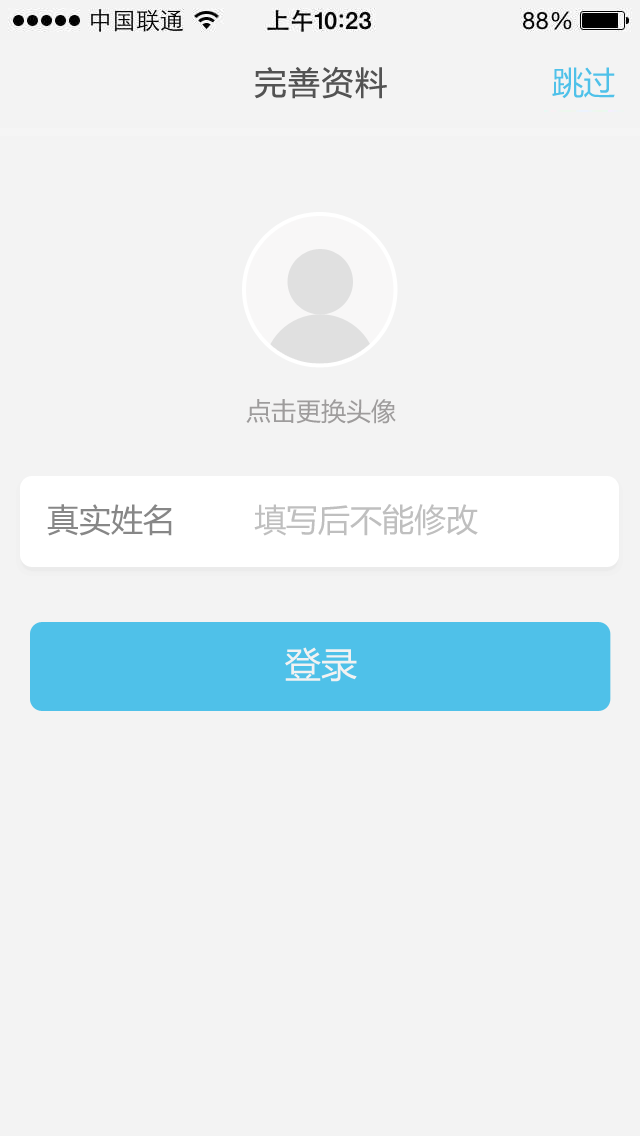
<style>
.page{position:relative;width:640px;height:1136px;background:#f3f3f3}
.page>*{position:absolute;margin:0}
.t1{font:32px "MicrosoftYaHei";letter-spacing:0.05em;color:#535353}
.t2{font:32px "MicrosoftYaHei";letter-spacing:-0.025em;color:#4fc1e9}
.t3{font:25px "MicrosoftYaHei";color:#9e9c9c}
.t4{font:32px "MicrosoftYaHei";color:#878787}
.t5{font:32px "MicrosoftYaHei";color:#bfbfbf}
.t6{font:36px "MicrosoftYaHei";color:#f2f2f2}
</style>
<div class="page">
<p class="t1" style="left:254px;top:66px;width:133px;height:33px">完善资料</p>
<p class="t2" style="left:552px;top:67px;width:63px;height:32px">跳过</p>
<p class="t3" style="left:246px;top:399px;width:150px;height:25px">点击更换头像</p>
<p class="t4" style="left:47px;top:504px;width:125px;height:32px">真实姓名</p>
<p class="t5" style="left:254px;top:504px;width:224px;height:32px">填写后不能修改</p>
<p class="t6" style="left:285px;top:647px;width:72px;height:35px">登录</p>
</div>
